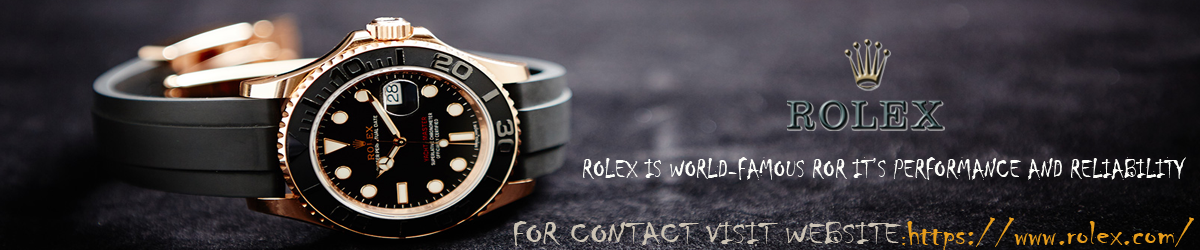
<style>
.page{position:relative;width:1200px;height:250px}
.page>*{position:absolute;margin:0}
.t1{font:27.9px "Chiller-Regular";color:#fcfdf8;scale:0.91 1}
.t2{font:32.5px "Chiller-Regular";color:#cbc2b3;scale:1.18 1}
.t3{font:20.2px "Chiller-Regular";color:#e79d1b;scale:1.18 1}
.t4{font:34px "Chiller-Regular";color:#e79d1b;scale:1.18 1}
</style>
<div class="page">
<p class="t1" style="left:583px;top:157px;width:603px;height:23px">ROLEX IS WORLD-FAMOUS ROR IT’S PERFORMANCE AND RELIABILITY</p>
<p class="t2" style="left:513px;top:217px;width:681px;height:34px">FOR CONTACT VISIT WEBSITE<span class="t3">:</span><span class="t4">https://www.rolex.com/</span></p>
</div>
